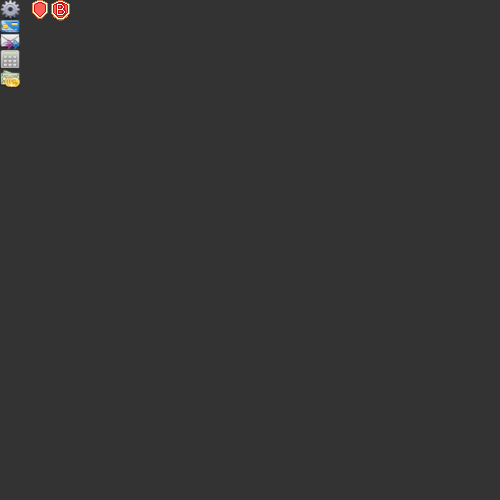
<style>
.page{position:relative;width:500px;height:500px;background:#333333}
.page>*{position:absolute;margin:0}
.t1{font:14px "Dotum";color:#fefefe}
</style>
<div class="page">
<p class="t1" style="left:57px;top:4px;width:8px;height:11px">B</p>
</div>
